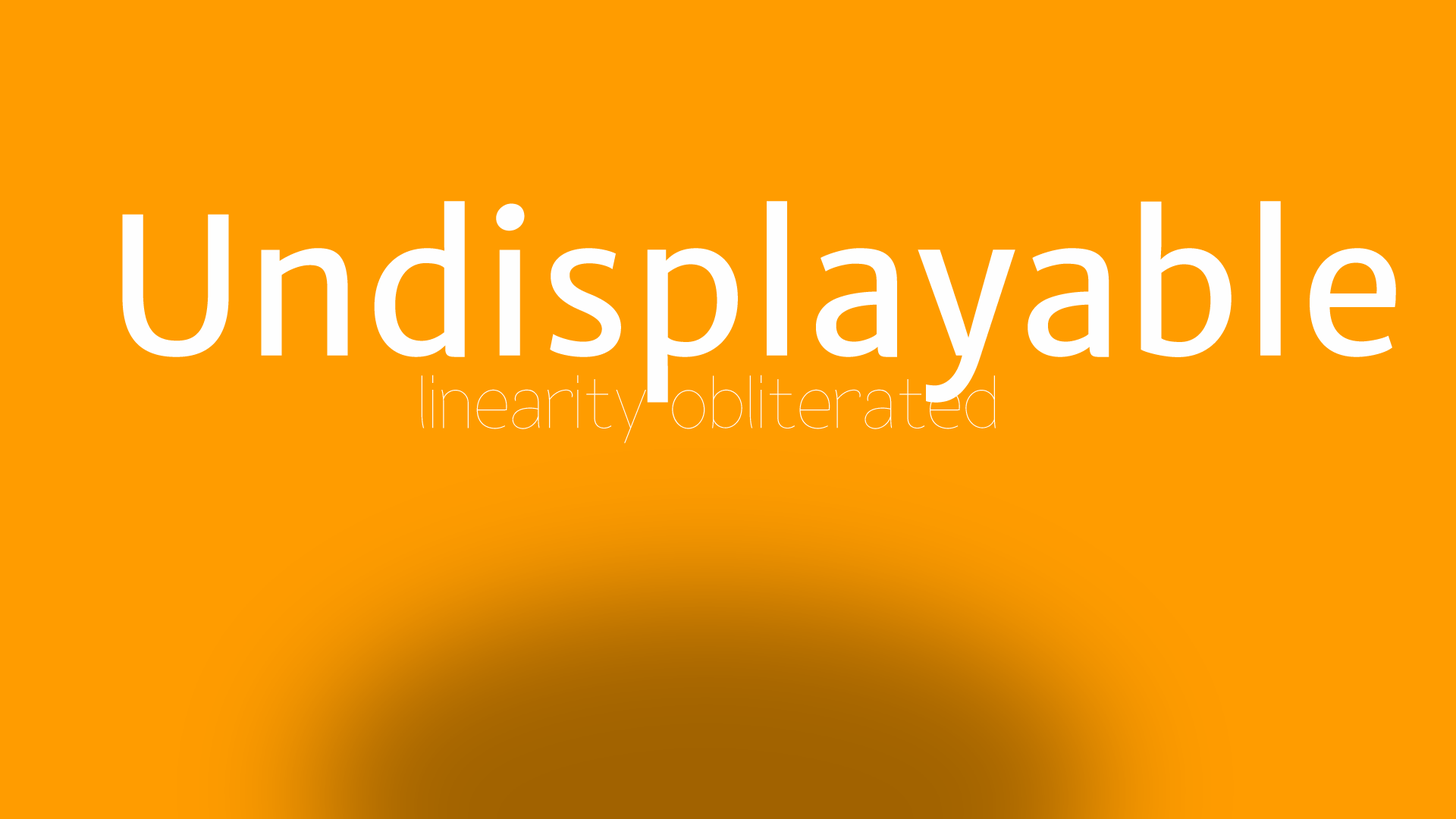
<style>
.page{position:relative;width:1456px;height:819px;background:#ff9c00}
.page>*{position:absolute;margin:0}
.t1{font:189.6px "MerriweatherSans-Regular";letter-spacing:0.01em;color:#fefefe}
.t2{font:60.7px "FlexDisplay-Thin";letter-spacing:0.01em;color:#fefefe}
</style>
<div class="page">
<p class="t1" style="left:122px;top:201px;width:1274px;height:202px">Undisplayable</p>
<p class="t2" style="left:421px;top:375px;width:575px;height:69px">linearity obliterated</p>
</div>
